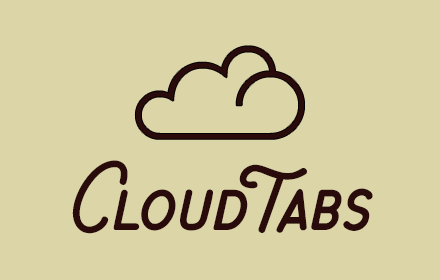
<style>
.page{position:relative;width:440px;height:280px;background:#dcd5a7}
.page>*{position:absolute;margin:0}
.t1{font:189.5px "ArialUnicodeMS";color:#290b0b}
.t2{font:82.8px "ChippewaFalls";color:#290b0b}
</style>
<div class="page">
<p class="t1" style="left:135px;top:46px;width:169px;height:93px">☁︎</p>
<p class="t2" style="left:72px;top:160px;width:301px;height:74px">CloudTabs</p>
</div>
